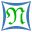
<style>
.page{position:relative;width:32px;height:32px;background:#ffffff}
.page>*{position:absolute;margin:0}
.t1{font:40px "MapInfoCartographic";color:#3f78b9}
.t2{font:24px "EuclidFraktur";color:#00b200}
</style>
<div class="page">
<p class="t1" style="left:1px;top:1px;width:30px;height:30px">&amp;</p>
<p class="t2" style="left:6px;top:7px;width:20px;height:18px">N</p>
</div>
